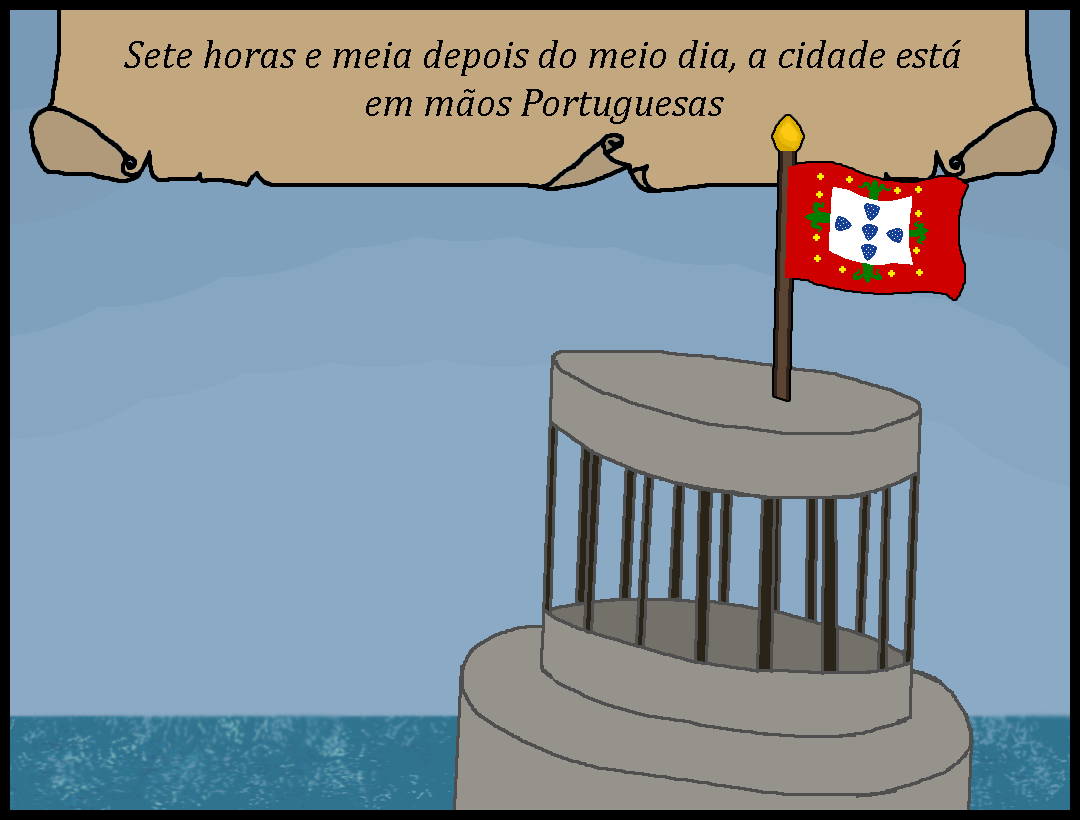
<style>
.page{position:relative;width:1080px;height:820px;background:#8aaac5}
.page>*{position:absolute;margin:0}
.t1{font:40px "Cambria-Italic";color:#000000}
</style>
<div class="page">
<p class="t1" style="left:124px;top:40px;width:837px;height:84px;text-align:center">Sete horas e meia depois do meio dia, a cidade está em mãos Portuguesas</p>
</div>
